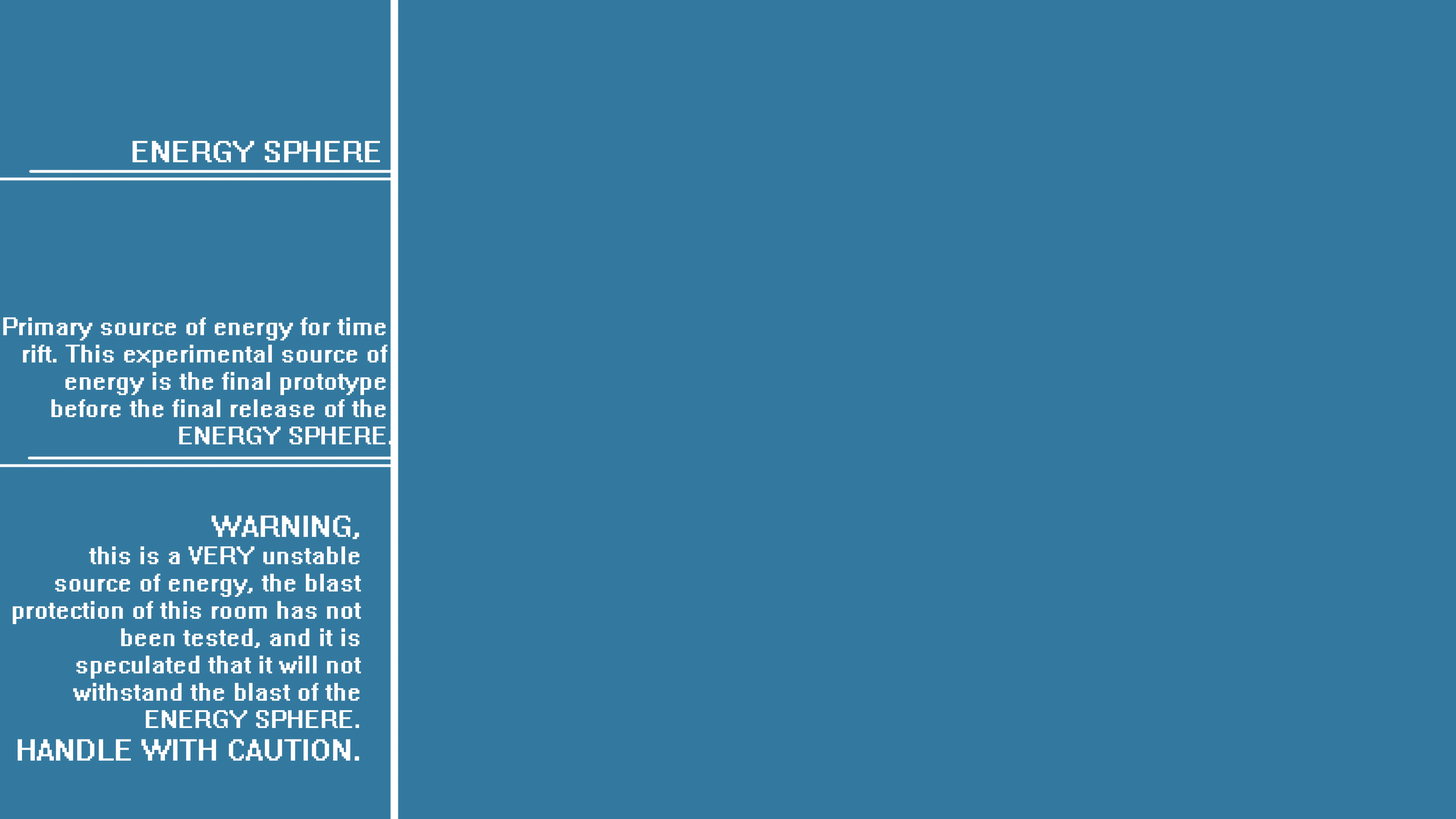
<style>
.page{position:relative;width:1456px;height:819px;background:#33799f}
.page>*{position:absolute;margin:0}
.t1{font:27.3px "System";color:#ffffff}
.t2{font:22.7px "System";color:#ffffff}
</style>
<div class="page">
<p class="t1" style="left:132px;top:141px;width:248px;height:21px">ENERGY SPHERE</p>
<p class="t2" style="left:3px;top:317px;width:389px;height:127px;text-align:right">Primary source of energy for time <br>rift. This experimental source of <br>energy is the final prototype <br>before the final release of the <br>ENERGY SPHERE.</p>
<p class="t2" style="left:13px;top:515px;width:348px;height:246px;text-align:right"><span class="t1">WARNING,<br></span>this is a VERY unstable<br>source of energy, the blast<br>protection of this room has not<br>been tested, and it is<br>speculated that it will not<br>withstand the blast of the<br>ENERGY SPHERE.<br><span class="t1">HANDLE WITH CAUTION.</span></p>
</div>
